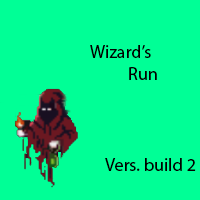
<style>
.page{position:relative;width:200px;height:200px;background:#00ff96}
.page>*{position:absolute;margin:0}
.t1{font:18px "MyriadPro-Regular";color:#000000}
</style>
<div class="page">
<p class="t1" style="left:90px;top:45px;width:67px;height:35px">Wizard’s<br>          Run</p>
<p class="t1" style="left:105px;top:158px;width:91px;height:13px">Vers. build 2</p>
</div>
